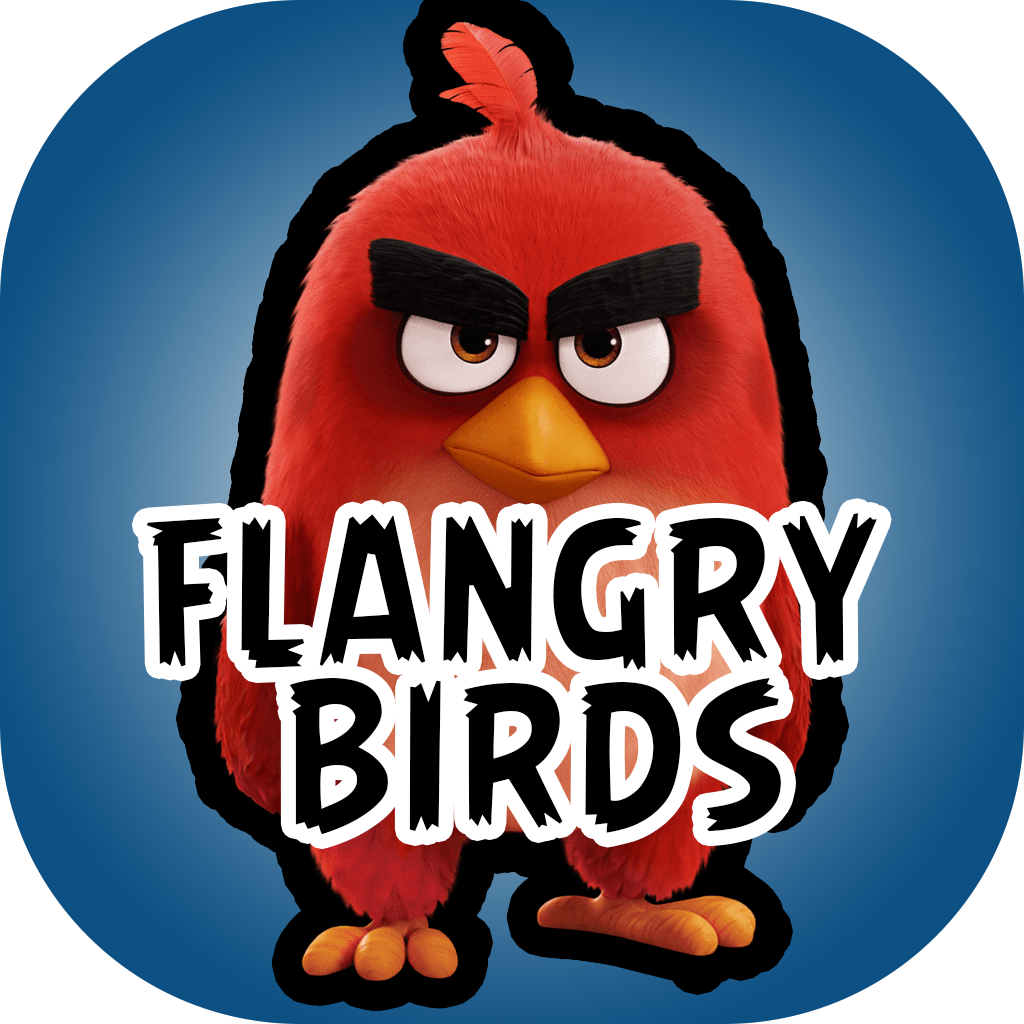
<style>
.page{position:relative;width:1024px;height:1024px}
.page>*{position:absolute;margin:0}
.t1{font:186.1px/165px "AngryBirds-Regular";letter-spacing:0.048em;color:#000000}
</style>
<div class="page">
<p class="t1" style="left:146px;top:513px;width:731px;height:322px;text-align:center">FLANGRY <br>BIRDS</p>
</div>
